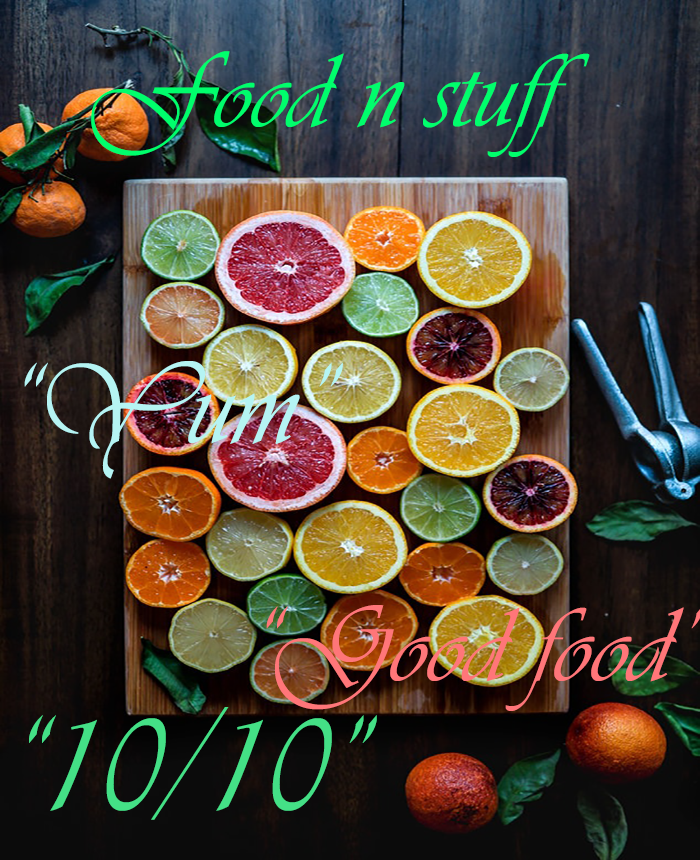
<style>
.page{position:relative;width:700px;height:860px}
.page>*{position:absolute;margin:0}
.t1{font:110px "Vivaldii";color:#00fe6c}
.t2{font:120px "Vivaldii";color:#b5f4f3}
.t3{font:140px "Vivaldii";color:#44e086}
</style>
<div class="page">
<p class="t1" style="left:91px;top:51px;width:499px;height:106px">Food n stuff</p>
<p class="t2" style="left:24px;top:361px;width:319px;height:118px">“Yum”</p>
<p class="t3" style="left:29px;top:707px;width:348px;height:113px">“10/10”</p>
</div>
